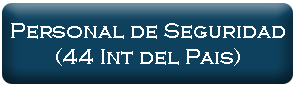
<style>
.page{position:relative;width:295px;height:85px;background:#0e415e}
.page>*{position:absolute;margin:0}
.t1{font:22px "CopperplateGothic-Light";color:#ffffff}
</style>
<div class="page">
<p class="t1" style="left:11px;top:23px;width:274px;height:43px;text-align:center">Personal de Seguridad<br>(44 Int del Pais)</p>
</div>
